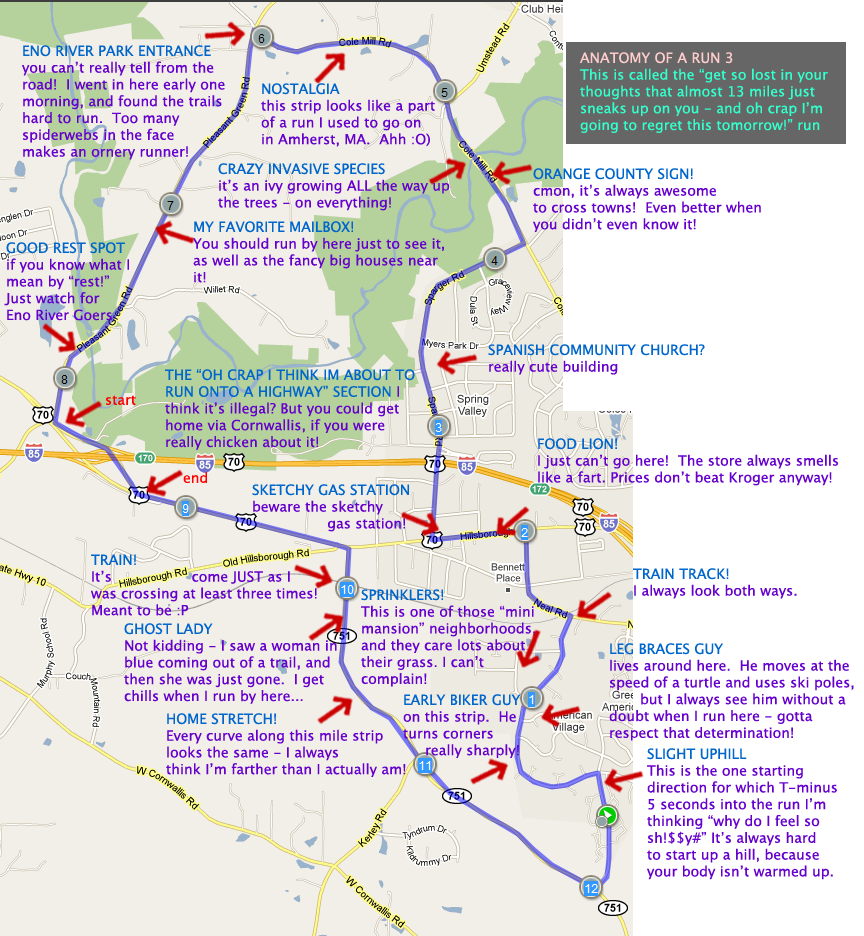
<style>
.page{position:relative;width:864px;height:936px;background:#f2efe9}
.page>*{position:absolute;margin:0}
.t1{font:14px "LucidaSans";color:#6600cc}
.t2{font:14px "LucidaSans";color:#0066cc}
.t3{font:14px "LucidaSans";color:#33ffcc}
.t4{font:14px "LucidaSans";color:#ffcccc}
.t5{font:14px "LucidaSans";color:#ff0000}
</style>
<div class="page">
<p class="t1" style="left:22px;top:45px;width:203px;height:115px"><span class="t2">ENO RIVER PARK ENTRANCE<br></span>you can’t really tell from the<br>road!  I went in here early one<br>morning, and found the trails<br>hard to run.  Too many<br>spiderwebs in the face <br>makes an ornery runner!</p>
<p class="t3" style="left:580px;top:52px;width:248px;height:81px"><span class="t4">ANATOMY OF A RUN 3<br></span>This is called the “get so lost in your thoughts that almost 13 miles just sneaks up on you - and oh crap I’m going to regret this tomorrow!” run</p>
<p class="t1" style="left:261px;top:83px;width:174px;height:64px"><span class="t2">NOSTALGIA<br></span>this strip looks like a part<br>of a run I used to go on<br>in Amherst, MA.  Ahh :O)</p>
<p class="t1" style="left:218px;top:163px;width:232px;height:48px"><span class="t2">CRAZY INVASIVE SPECIES<br></span>it’s an ivy growing ALL the way up<br>the trees - on everything!</p>
<p class="t1" style="left:533px;top:168px;width:228px;height:64px"><span class="t2">ORANGE COUNTY SIGN!<br></span>cmon, it’s always awesome <br>to cross towns!  Even better when you didn’t even know it!</p>
<p class="t1" style="left:193px;top:221px;width:251px;height:62px"><span class="t2">MY FAVORITE MAILBOX!<br></span>You should run by here just to see it, as well as the fancy big houses near it!</p>
<p class="t1" style="left:4px;top:242px;width:125px;height:79px"><span class="t2">GOOD REST SPOT<br></span>if you know what I<br>mean by “rest!” <br>Just watch for <br>Eno River Goers</p>
<p class="t2" style="left:488px;top:344px;width:217px;height:31px">SPANISH COMMUNITY CHURCH?<br><span class="t1">really cute building</span></p>
<p class="t1" style="left:165px;top:369px;width:250px;height:81px"><span class="t2">THE “OH CRAP I THINK IM ABOUT TO RUN ONTO A HIGHWAY” SECTION </span>I think it’s illegal? But you could get home via Cornwallis, if you were really chicken about it!</p>
<p class="t5" style="left:106px;top:395px;width:30px;height:10px">start</p>
<p class="t1" style="left:538px;top:438px;width:301px;height:48px"><span class="t2">FOOD LION!<br></span>I just can’t go here!  The store always smells like a fart. Prices don’t beat Kroger anyway!</p>
<p class="t5" style="left:183px;top:472px;width:24px;height:11px">end</p>
<p class="t1" style="left:252px;top:484px;width:157px;height:48px"><span class="t2">SKETCHY GAS STATION<br></span>beware the sketchy <br>                 gas station!</p>
<p class="t1" style="left:91px;top:554px;width:226px;height:62px"><span class="t2">TRAIN!<br></span>It’s                  come JUST as I <br>was crossing at least three times!  Meant to be :P</p>
<p class="t1" style="left:633px;top:568px;width:164px;height:31px"><span class="t2">TRAIN TRACK!<br></span>I always look both ways.</p>
<p class="t1" style="left:361px;top:589px;width:174px;height:98px"><span class="t2">SPRINKLERS!<br></span>This is one of those “mini<br>mansion” neighborhoods,<br>and they care lots about<br>their grass. I can’t<br>complain!</p>
<p class="t1" style="left:124px;top:623px;width:213px;height:81px"><span class="t2">GHOST LADY<br></span>Not kidding - I saw a woman in<br>blue coming out of a trail, and<br>then she was just gone.  I get <br>chills when I run by here...</p>
<p class="t1" style="left:609px;top:643px;width:245px;height:98px"><span class="t2">LEG BRACES GUY<br></span>lives around here.  He moves at the<br>speed of a turtle and uses ski poles,<br>       but I always see him without a doubt when I run here - gotta <br>respect that determination!</p>
<p class="t1" style="left:403px;top:694px;width:118px;height:64px"><span class="t2">EARLY BIKER GUY<br></span>on this strip.  He<br>turns corners <br>     really sharply!</p>
<p class="t1" style="left:166px;top:713px;width:240px;height:64px"><span class="t2">HOME STRETCH!<br></span>Every curve along this mile strip<br>looks the same - I always <br>think I’m farther than I actually am!</p>
<p class="t1" style="left:647px;top:748px;width:190px;height:132px"><span class="t2">SLIGHT UPHILL<br></span>This is the one starting <br>direction for which T-minus <br>5 seconds into the run I’m<br>thinking “why do I feel so <br>sh!$$y#” It’s always hard <br>to start up a hill, because<br>your body isn’t warmed up.</p>
</div>
